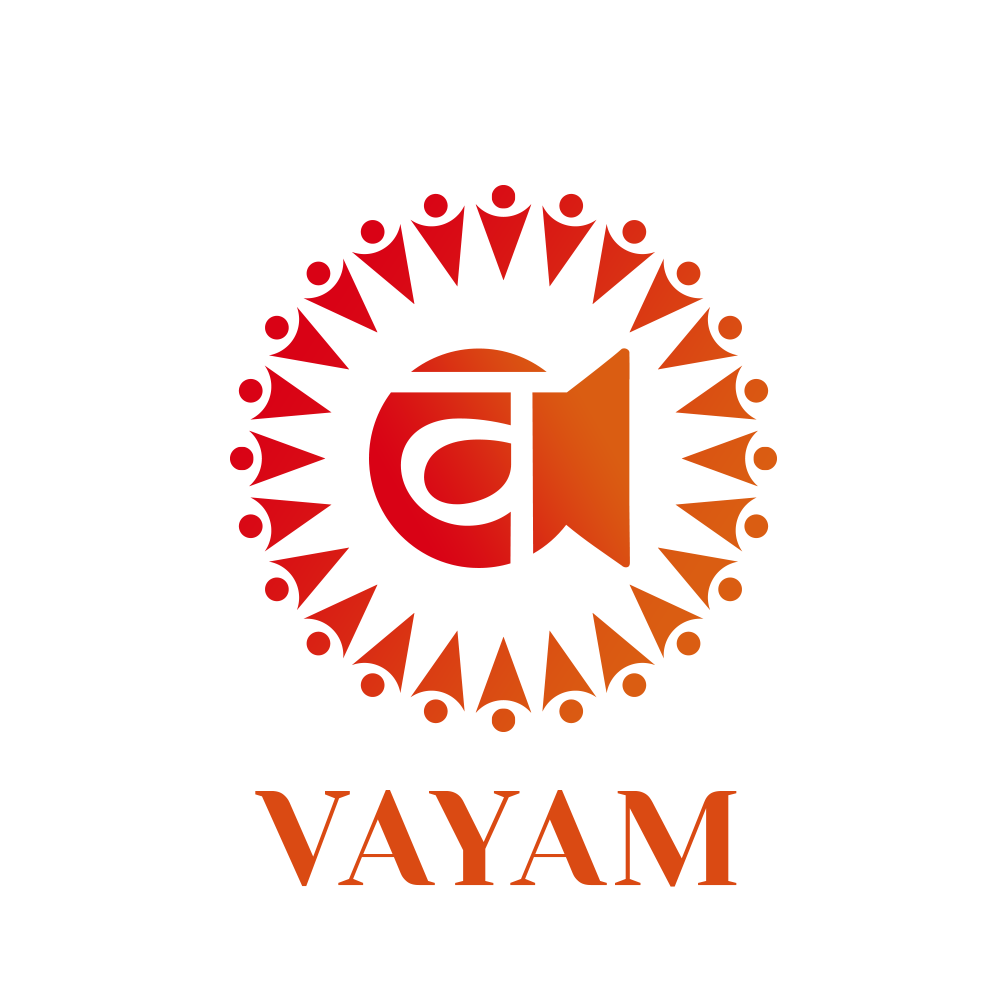
<style>
.page{position:relative;width:1000px;height:1000px;background:#ffffff}
.page>*{position:absolute;margin:0}
.t1{font:134.3px "YesevaOne";letter-spacing:0.05em;color:#da4a13;text-transform:uppercase}
</style>
<div class="page">
<p class="t1" style="left:255px;top:790px;width:482px;height:97px">Vayam</p>
</div>
